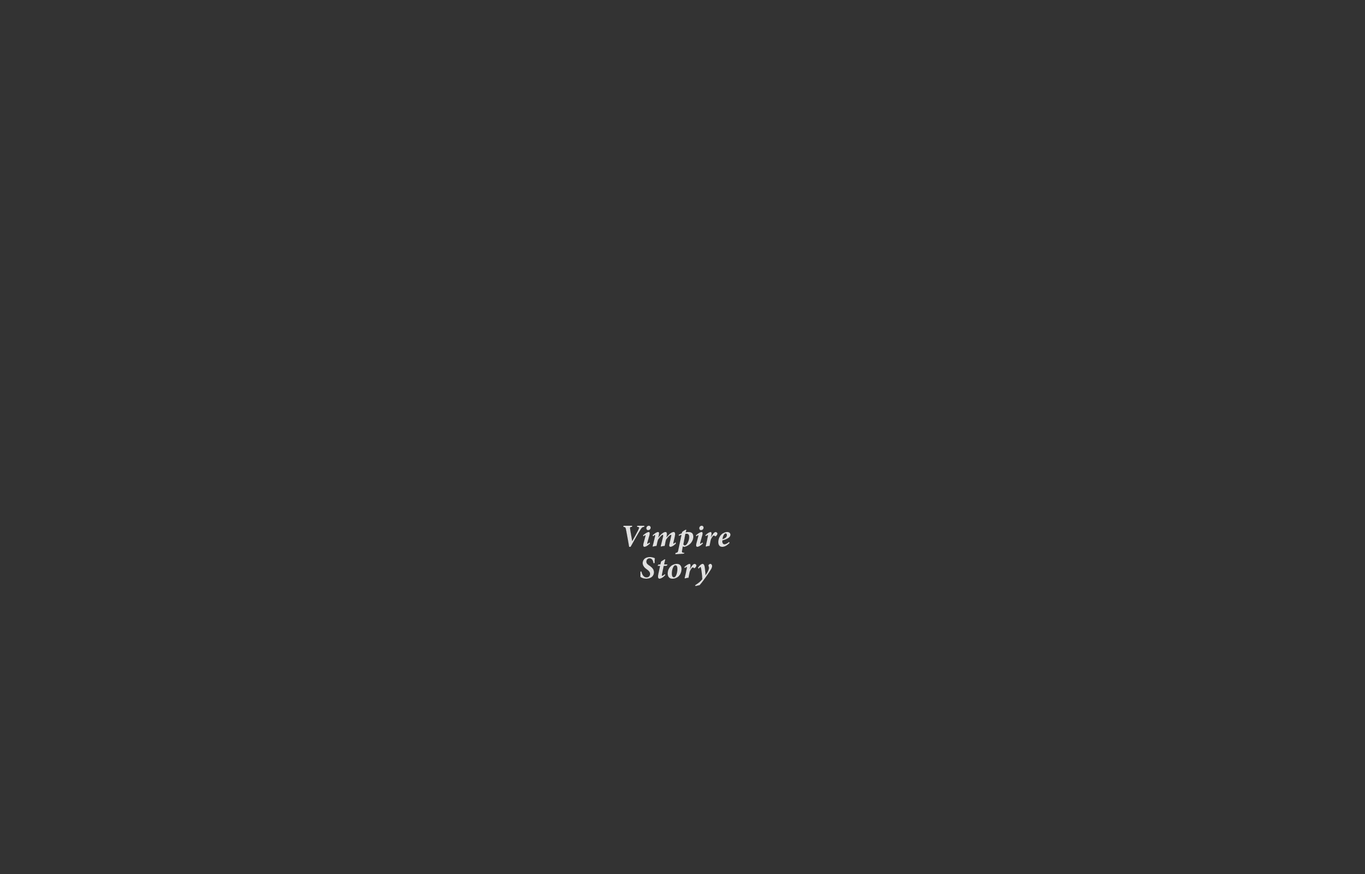
<style>
.page{position:relative;width:1365px;height:874px;background:#333333}
.page>*{position:absolute;margin:0}
.t1{font:31.7px/31.7px "MinionPro-BoldIt";letter-spacing:0.025em;color:#e0e0e0}
</style>
<div class="page">
<p class="t1" style="left:623px;top:526px;width:108px;height:60px;text-align:center">Vimpire<br>Story</p>
</div>
